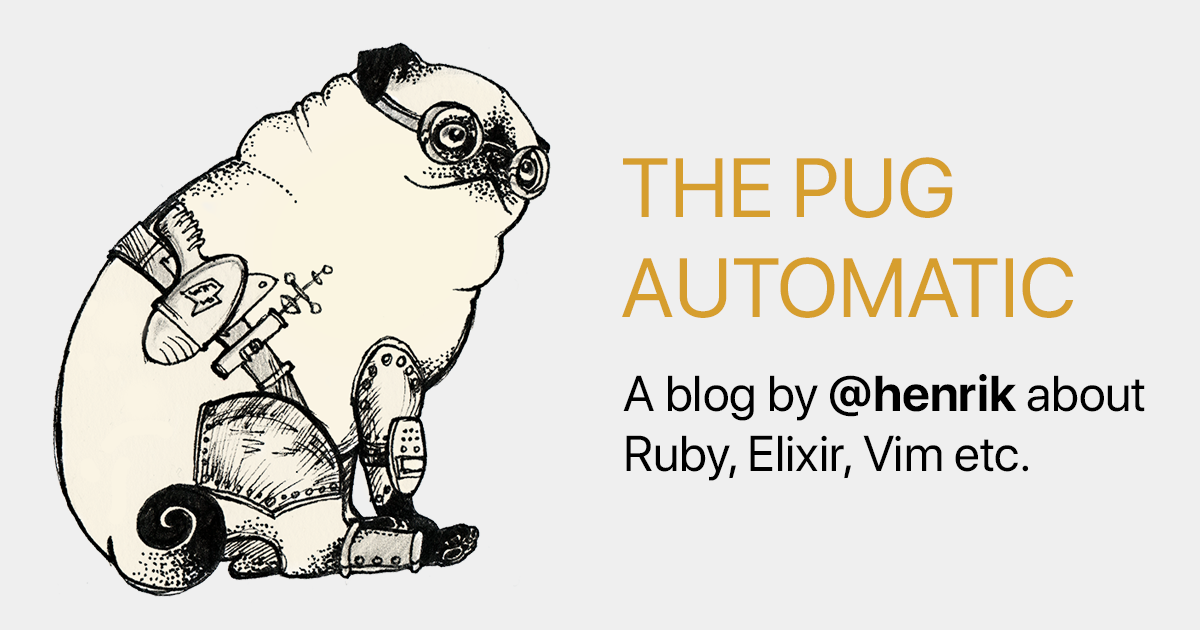
<style>
.page{position:relative;width:1200px;height:630px;background:#efefef}
.page>*{position:absolute;margin:0}
.t1{font:83.3px "SFProDisplay-Regular";color:#d69e2e;text-transform:uppercase}
.t2{font:50px "SFProDisplay-Regular";color:#000000}
.t3{font:50px "SFProDisplay-Bold";color:#000000}
</style>
<div class="page">
<p class="t1" style="left:622px;top:157px;width:452px;height:161px">The Pug<br>Automatic</p>
<p class="t2" style="left:623px;top:374px;width:522px;height:107px">A blog by <span class="t3">@henrik</span> about<br>Ruby, Elixir, Vim etc.</p>
</div>
